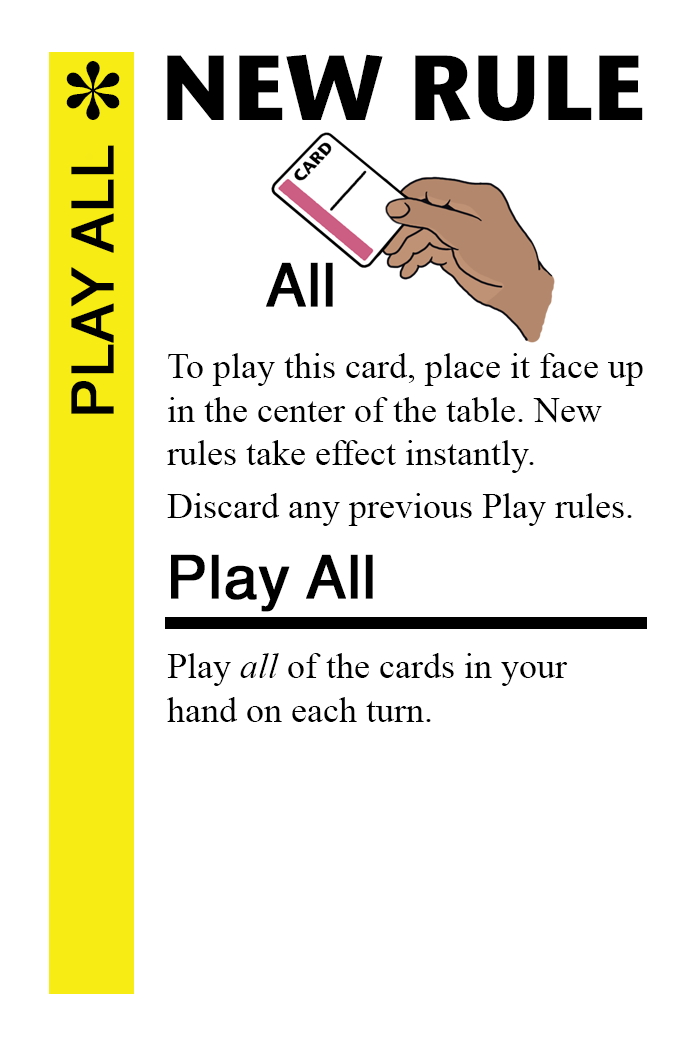
<style>
.page{position:relative;width:700px;height:1042px;background:#ffffff}
.page>*{position:absolute;margin:0}
.t1{font:92px "StoneSansITC-Bold";color:#000000}
.t2{font:82px "MS-Gothic";color:#000000}
.t3{font:58px "Helvetica";color:#000000;font-weight:bold}
.t4{font:60px "Helvetica";color:#000000;font-weight:bold}
.t5{font:36px "TimesNewRomanPSMT";color:#000000}
.t6{font:36px "TimesNewRomanPS-ItalicMT";color:#000000}
</style>
<div class="page">
<p class="t1" style="left:167px;top:54px;width:476px;height:67px">NEW RULE</p>
<p class="t2" style="left:66px;top:61px;width:54px;height:59px">✽</p>
<p class="t3" style="left:71px;top:145px;width:43px;height:269px;rotate:-90deg">PLAY ALL</p>
<p class="t4" style="left:266px;top:262px;width:67px;height:45px">All</p>
<p class="t5" style="left:167px;top:353px;width:476px;height:120px">To play this card, place it face up<br>in the center of the table. New <br>rules take effect instantly.</p>
<p class="t5" style="left:167px;top:493px;width:465px;height:33px">Discard any previous Play rules.</p>
<p class="t4" style="left:171px;top:554px;width:202px;height:58px">Play All</p>
<p class="t5" style="left:167px;top:653px;width:401px;height:69px">Play <span class="t6">all</span> of the cards in your<br>hand on each turn.</p>
</div>
